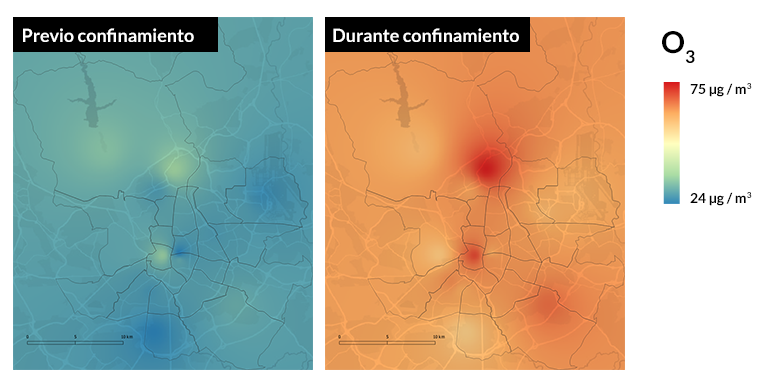
<style>
.page{position:relative;width:780px;height:380px;background:#ffffff}
.page>*{position:absolute;margin:0}
.t1{font:18px "Lato-Bold";color:#ffffff}
.t2{font:30px "Lato-Bold";color:#000000}
.t3{font:14px "Lato-Bold";color:#000000}
</style>
<div class="page">
<p class="t1" style="left:23px;top:28px;width:171px;height:14px">Previo confinamiento</p>
<p class="t1" style="left:333px;top:28px;width:186px;height:14px">Durante confinamiento</p>
<p class="t2" style="left:662px;top:31px;width:33px;height:32px">O3</p>
<p class="t3" style="left:690px;top:83px;width:62px;height:14px">75 μg / m3</p>
<p class="t3" style="left:690px;top:192px;width:62px;height:14px">24 μg / m3</p>
</div>
